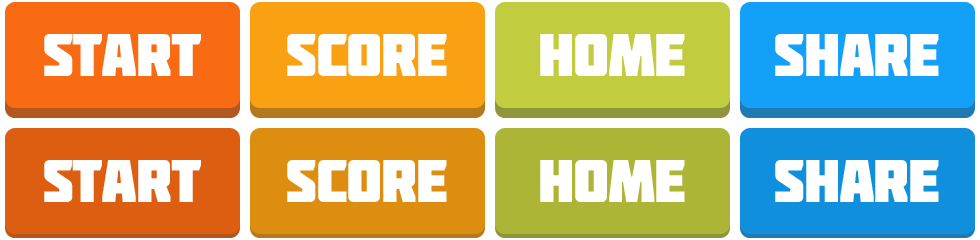
<style>
.page{position:relative;width:980px;height:240px;background:#ffffff}
.page>*{position:absolute;margin:0}
.t1{font:60px "Molot";letter-spacing:-0.02em;color:#ffffff}
</style>
<div class="page">
<p class="t1" style="left:44px;top:34px;width:157px;height:42px">START</p>
<p class="t1" style="left:287px;top:34px;width:160px;height:42px">score</p>
<p class="t1" style="left:540px;top:34px;width:145px;height:42px">home</p>
<p class="t1" style="left:775px;top:34px;width:164px;height:42px">share</p>
<p class="t1" style="left:44px;top:160px;width:157px;height:42px">START</p>
<p class="t1" style="left:287px;top:160px;width:160px;height:42px">score</p>
<p class="t1" style="left:540px;top:160px;width:145px;height:42px">home</p>
<p class="t1" style="left:775px;top:160px;width:164px;height:42px">share</p>
</div>
